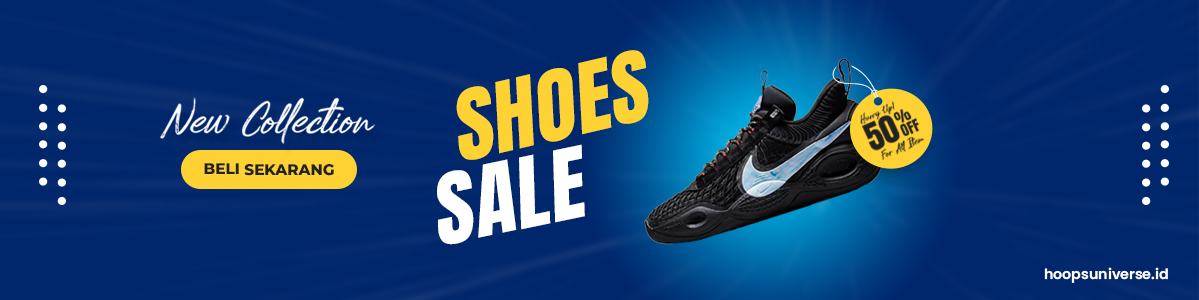
<style>
.page{position:relative;width:1199px;height:300px;background:#00266b}
.page>*{position:absolute;margin:0}
.t1{font:82.9px "Anton-Regular";letter-spacing:0.01em;color:#ffd234;text-transform:uppercase}
.t2{font:44.2px "Spartwell";color:#ffffff}
.t3{font:14.3px "Anton-Regular";color:#222222;text-transform:uppercase}
.t4{font:32.2px "Anton-Regular";color:#222222;text-transform:uppercase}
.t5{font:10px "Spartwell";letter-spacing:0.025em;color:#222222}
.t6{font:83.7px "Anton-Regular";letter-spacing:0.01em;color:#ffffff;text-transform:uppercase}
.t7{font:15.3px "Montserrat-ExtraBold";color:#222222;text-transform:uppercase}
.t8{font:14.3px "Poppins-SemiBold";color:#ffffff}
</style>
<div class="page">
<p class="t1" style="left:456px;top:50px;width:193px;height:110px;rotate:-13deg">shoes</p>
<p class="t2" style="left:160px;top:97px;width:216px;height:47px">New Collection</p>
<p class="t3" style="left:893px;top:108px;width:19px;height:16px;rotate:-24deg">%</p>
<p class="t4" style="left:861px;top:114px;width:40px;height:38px;rotate:-24deg">50</p>
<p class="t3" style="left:899px;top:117px;width:21px;height:20px;rotate:-24deg">Off</p>
<p class="t5" style="left:880px;top:136px;width:45px;height:25px;rotate:-24deg">For All Item</p>
<p class="t6" style="left:437px;top:144px;width:148px;height:101px;rotate:-12deg">Sale</p>
<p class="t7" style="left:204px;top:163px;width:130px;height:13px">BELI SEKARANG</p>
<p class="t8" style="left:1044px;top:267px;width:124px;height:16px">hoopsuniverse.id</p>
</div>
